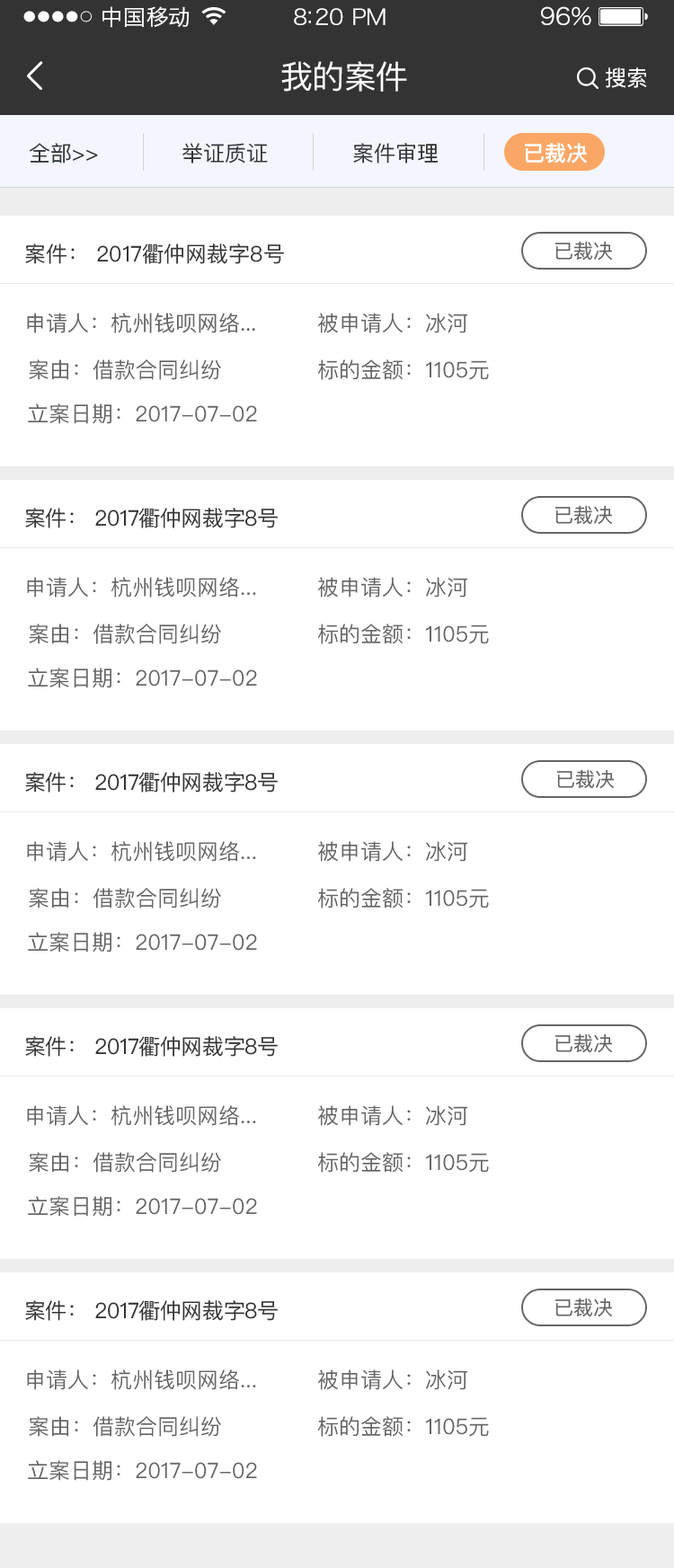
<style>
.page{position:relative;width:674px;height:1568px;background:#ffffff}
.page>*{position:absolute;margin:0}
.t1{font:21.6px "HiraginoSansGB-W3";letter-spacing:0.02em;color:#ffffff;scale:1.03 1}
.t2{font:21.6px "HiraginoSansGB-W3";letter-spacing:-0.02em;color:#ffffff;scale:1.03 1}
.t3{font:23.5px "HiraginoSansGB-W3";letter-spacing:-0.02em;color:#ffffff;scale:1.03 1}
.t4{font:32.3px "PingFangSC-Regular";letter-spacing:-0.02em;color:#ffffff}
.t5{font:21.6px "PingFangSC-Regular";letter-spacing:-0.02em;color:#ffffff}
.t6{font:21.6px "PingFangSC-Regular";color:#333333}
.t7{font:21.6px "PingFangSC-Semibold";color:#ffffff}
.t8{font:19.8px "PingFangSC-Regular";color:#666666}
.t9{font:21.6px "PingFangSC-Regular";color:#666666}
.t10{font:21.6px "PingFangSC-Regular";letter-spacing:-0.02em;color:#333333}
</style>
<div class="page">
<p class="t1" style="left:102px;top:6px;width:88px;height:22px">中国移动</p>
<p class="t2" style="left:294px;top:8px;width:91px;height:17px">8:20 PM</p>
<p class="t3" style="left:541px;top:6px;width:50px;height:20px">96%</p>
<p class="t4" style="left:281px;top:61px;width:126px;height:31px">我的案件</p>
<p class="t5" style="left:606px;top:67px;width:41px;height:21px">搜索</p>
<p class="t6" style="left:29px;top:143px;width:69px;height:21px">全部&gt;&gt;</p>
<p class="t6" style="left:182px;top:143px;width:86px;height:21px">举证质证</p>
<p class="t6" style="left:353px;top:143px;width:85px;height:21px">案件审理</p>
<p class="t7" style="left:525px;top:143px;width:63px;height:21px">已裁决</p>
<p class="t6" style="left:25px;top:244px;width:259px;height:20px">案件： 2017衢仲网裁字8号</p>
<p class="t8" style="left:555px;top:241px;width:58px;height:20px">已裁决</p>
<p class="t9" style="left:27px;top:313px;width:228px;height:20px">申请人：杭州钱呗网络...</p>
<p class="t9" style="left:318px;top:313px;width:149px;height:20px">被申请人：冰河</p>
<p class="t9" style="left:29px;top:359px;width:192px;height:21px">案由：借款合同纠纷</p>
<p class="t9" style="left:318px;top:359px;width:171px;height:21px">标的金额：1105元</p>
<p class="t9" style="left:28px;top:403px;width:229px;height:21px">立案日期：2017-07-02</p>
<p class="t10" style="left:25px;top:508px;width:253px;height:20px">案件： 2017衢仲网裁字8号</p>
<p class="t8" style="left:555px;top:505px;width:58px;height:20px">已裁决</p>
<p class="t9" style="left:27px;top:577px;width:229px;height:21px">申请人：杭州钱呗网络...</p>
<p class="t9" style="left:318px;top:577px;width:149px;height:21px">被申请人：冰河</p>
<p class="t9" style="left:29px;top:624px;width:192px;height:20px">案由：借款合同纠纷</p>
<p class="t9" style="left:318px;top:624px;width:171px;height:20px">标的金额：1105元</p>
<p class="t9" style="left:28px;top:668px;width:229px;height:20px">立案日期：2017-07-02</p>
<p class="t10" style="left:25px;top:772px;width:253px;height:21px">案件： 2017衢仲网裁字8号</p>
<p class="t8" style="left:557px;top:769px;width:58px;height:20px">已裁决</p>
<p class="t9" style="left:27px;top:841px;width:229px;height:21px">申请人：杭州钱呗网络...</p>
<p class="t9" style="left:318px;top:841px;width:149px;height:21px">被申请人：冰河</p>
<p class="t9" style="left:29px;top:888px;width:192px;height:20px">案由：借款合同纠纷</p>
<p class="t9" style="left:318px;top:888px;width:171px;height:20px">标的金额：1105元</p>
<p class="t9" style="left:28px;top:932px;width:229px;height:20px">立案日期：2017-07-02</p>
<p class="t10" style="left:25px;top:1036px;width:253px;height:21px">案件： 2017衢仲网裁字8号</p>
<p class="t8" style="left:555px;top:1033px;width:58px;height:20px">已裁决</p>
<p class="t9" style="left:27px;top:1105px;width:229px;height:21px">申请人：杭州钱呗网络...</p>
<p class="t9" style="left:318px;top:1105px;width:149px;height:21px">被申请人：冰河</p>
<p class="t9" style="left:29px;top:1152px;width:192px;height:21px">案由：借款合同纠纷</p>
<p class="t9" style="left:318px;top:1152px;width:171px;height:21px">标的金额：1105元</p>
<p class="t9" style="left:28px;top:1196px;width:229px;height:21px">立案日期：2017-07-02</p>
<p class="t10" style="left:25px;top:1300px;width:253px;height:21px">案件： 2017衢仲网裁字8号</p>
<p class="t8" style="left:555px;top:1298px;width:58px;height:19px">已裁决</p>
<p class="t9" style="left:27px;top:1369px;width:229px;height:21px">申请人：杭州钱呗网络...</p>
<p class="t9" style="left:318px;top:1369px;width:149px;height:21px">被申请人：冰河</p>
<p class="t9" style="left:29px;top:1416px;width:192px;height:21px">案由：借款合同纠纷</p>
<p class="t9" style="left:318px;top:1416px;width:171px;height:21px">标的金额：1105元</p>
<p class="t9" style="left:28px;top:1460px;width:229px;height:21px">立案日期：2017-07-02</p>
</div>
